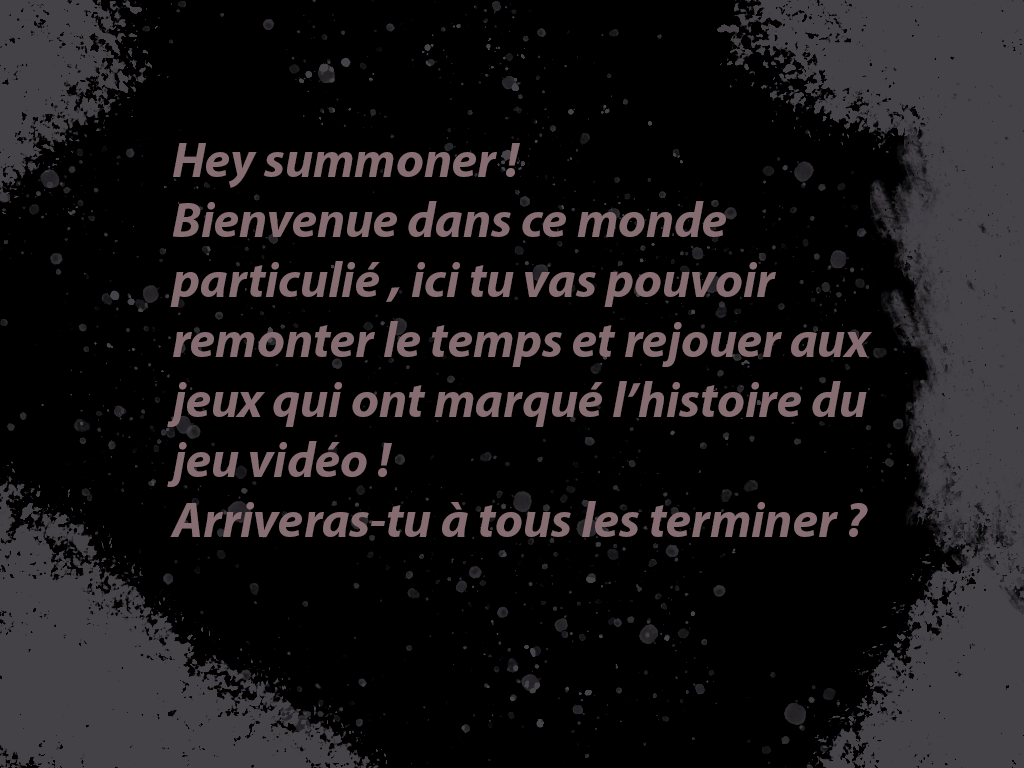
<style>
.page{position:relative;width:1024px;height:768px;background:#000000}
.page>*{position:absolute;margin:0}
.t1{font:50px "MyriadPro-BoldIt";color:#846c70}
</style>
<div class="page">
<p class="t1" style="left:167px;top:143px;width:705px;height:394px">Hey summoner !<br>Bienvenue dans ce monde particulié , ici tu vas pouvoir remonter le temps et rejouer aux jeux qui ont marqué l’histoire du jeu vidéo ! <br>Arriveras-tu à tous les terminer ?</p>
</div>
